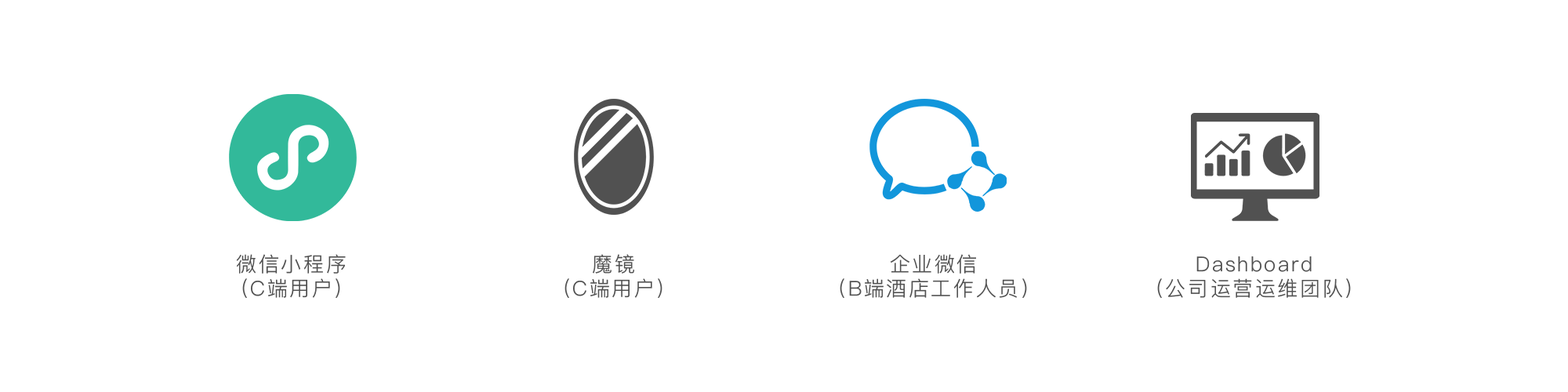
<style>
.page{position:relative;width:1568px;height:392px;background:#ffffff}
.page>*{position:absolute;margin:0}
.t1{font:20.4px/31.4px "PingFangSC-Light";letter-spacing:0.1em;color:#515151}
</style>
<div class="page">
<p class="t1" style="left:236px;top:254px;width:110px;height:44px;text-align:center">微信小程序<br>（C端用户）</p>
<p class="t1" style="left:564px;top:254px;width:98px;height:44px;text-align:center">魔镜<br>（C端用户）</p>
<p class="t1" style="left:840px;top:254px;width:187px;height:44px;text-align:center">企业微信<br>（B端酒店工作人员）</p>
<p class="t1" style="left:1157px;top:256px;width:194px;height:42px;text-align:center">Dashboard<br>（公司运营运维团队）</p>
</div>
